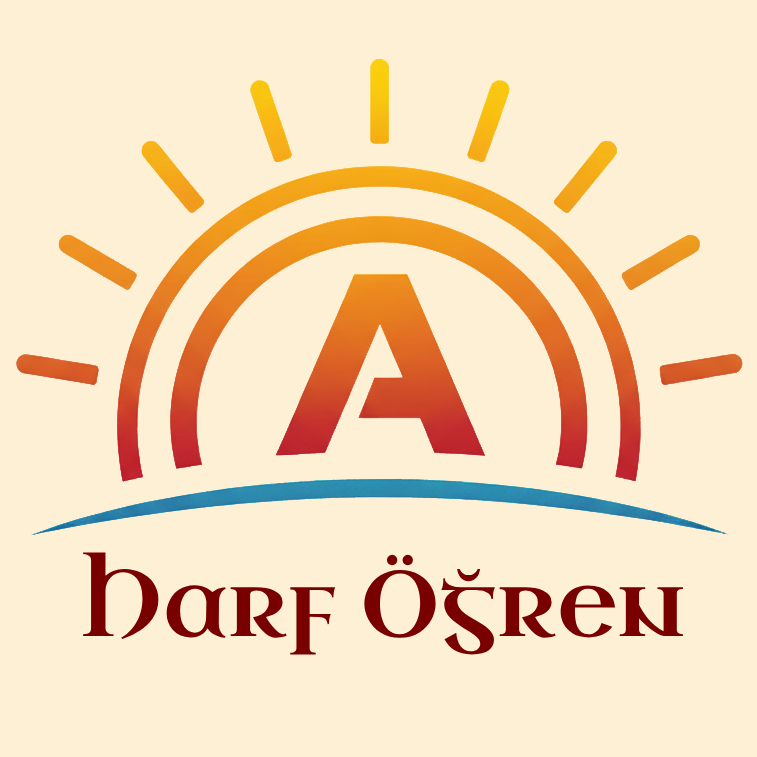
<style>
.page{position:relative;width:757px;height:757px;background:#fdf0d5}
.page>*{position:absolute;margin:0}
.t1{font:93px "UncialAntiqua-Regular";color:#780000}
</style>
<div class="page">
<p class="t1" style="left:83px;top:552px;width:600px;height:103px">Harf Öğren</p>
</div>
